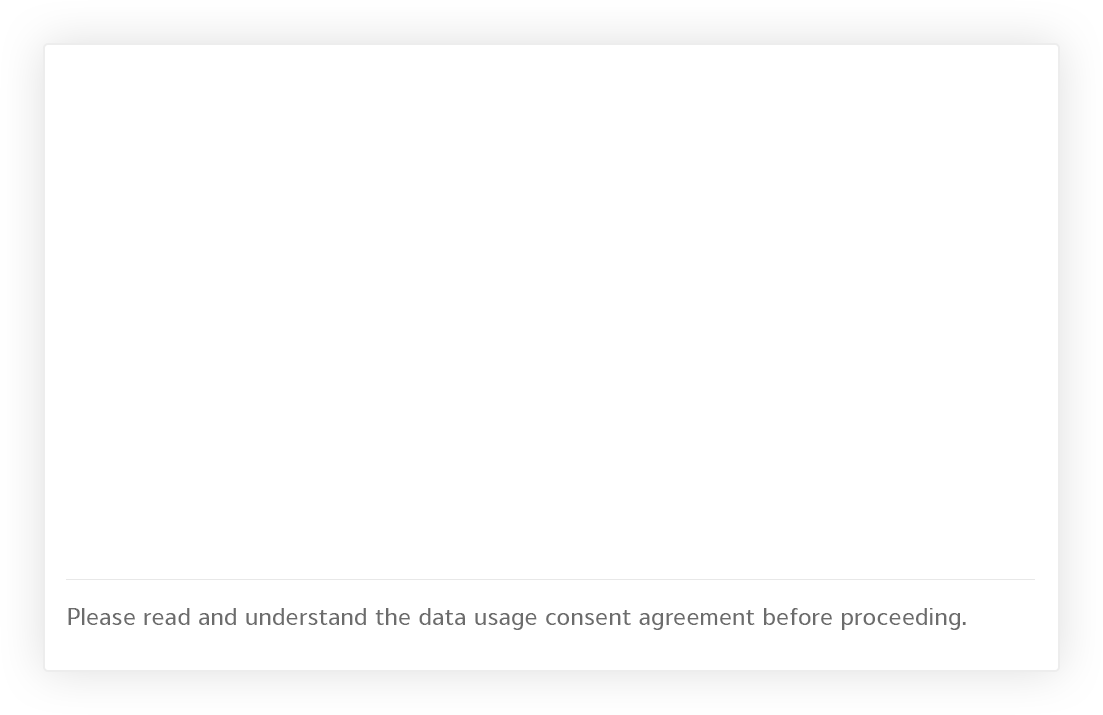
<style>
.page{position:relative;width:1103px;height:715px;background:#ffffff}
.page>*{position:absolute;margin:0}
.t1{font:25.4px "Anuyart-Regular";color:#6c6c6c}
</style>
<div class="page">
<p class="t1" style="left:68px;top:608px;width:898px;height:22px">Please read and understand the data usage consent agreement before proceeding.</p>
</div>
